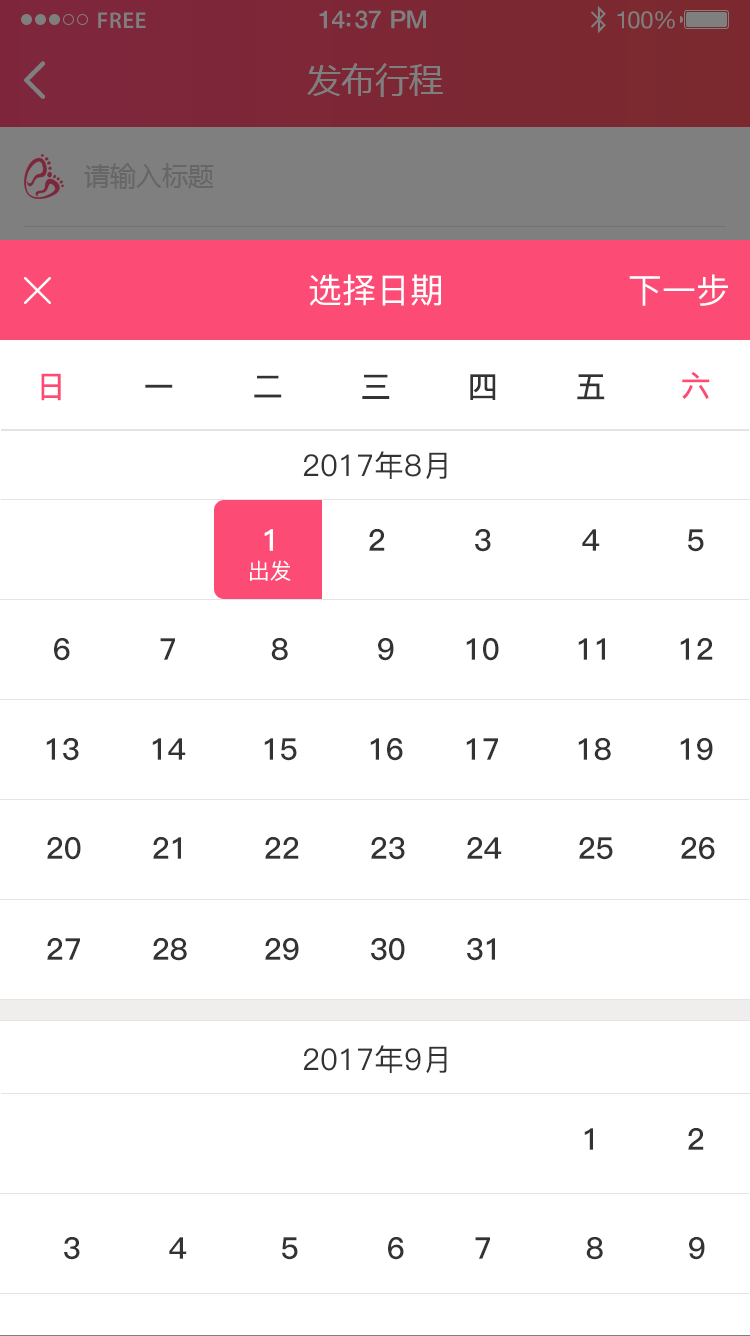
<style>
.page{position:relative;width:750px;height:1336px;background:#ffffff}
.page>*{position:absolute;margin:0}
.t1{font:34px "PingFang-SC-Medium";color:#ffffff;text-transform:uppercase}
.t2{font:30px "PingFang-SC-Bold";color:#fc4c75;text-transform:uppercase}
.t3{font:30px "PingFang-SC-Bold";color:#333333;text-transform:uppercase}
.t4{font:30px "PingFang-SC-Medium";color:#333333;text-transform:uppercase}
.t5{font:30px "PingFang-SC-Bold";color:#ffffff;text-transform:uppercase}
.t6{font:22px "PingFang-SC-Medium";color:#ffffff;text-transform:uppercase}
</style>
<div class="page">
<p class="t1" style="left:309px;top:274px;width:132px;height:32px">选择日期</p>
<p class="t1" style="left:629px;top:274px;width:99px;height:32px">下一步</p>
<p class="t2" style="left:41px;top:373px;width:20px;height:28px">日</p>
<p class="t3" style="left:254px;top:375px;width:28px;height:23px">二</p>
<p class="t3" style="left:362px;top:374px;width:28px;height:25px">三</p>
<p class="t3" style="left:470px;top:374px;width:26px;height:26px">四</p>
<p class="t3" style="left:577px;top:374px;width:28px;height:26px">五</p>
<p class="t2" style="left:682px;top:372px;width:28px;height:27px">六</p>
<p class="t3" style="left:145px;top:384px;width:28px;height:4px">一</p>
<p class="t4" style="left:303px;top:451px;width:144px;height:28px">2017年8月</p>
<p class="t5" style="left:264px;top:529px;width:9px;height:22px">1</p>
<p class="t3" style="left:369px;top:529px;width:16px;height:22px">2</p>
<p class="t3" style="left:475px;top:529px;width:16px;height:23px">3</p>
<p class="t3" style="left:582px;top:529px;width:18px;height:22px">4</p>
<p class="t3" style="left:688px;top:529px;width:16px;height:23px">5</p>
<p class="t6" style="left:250px;top:560px;width:41px;height:21px">出发</p>
<p class="t3" style="left:54px;top:638px;width:16px;height:23px">6</p>
<p class="t3" style="left:160px;top:638px;width:15px;height:22px">7</p>
<p class="t3" style="left:271px;top:638px;width:17px;height:23px">8</p>
<p class="t3" style="left:378px;top:638px;width:16px;height:23px">9</p>
<p class="t3" style="left:466px;top:638px;width:33px;height:23px">10</p>
<p class="t3" style="left:578px;top:638px;width:27px;height:22px">11</p>
<p class="t3" style="left:680px;top:638px;width:33px;height:22px">12</p>
<p class="t3" style="left:46px;top:738px;width:33px;height:23px">13</p>
<p class="t3" style="left:152px;top:738px;width:34px;height:22px">14</p>
<p class="t3" style="left:264px;top:738px;width:33px;height:23px">15</p>
<p class="t3" style="left:370px;top:738px;width:33px;height:23px">16</p>
<p class="t3" style="left:466px;top:738px;width:32px;height:22px">17</p>
<p class="t3" style="left:578px;top:738px;width:33px;height:23px">18</p>
<p class="t3" style="left:680px;top:738px;width:33px;height:23px">19</p>
<p class="t3" style="left:47px;top:837px;width:34px;height:23px">20</p>
<p class="t3" style="left:153px;top:837px;width:28px;height:22px">21</p>
<p class="t3" style="left:265px;top:837px;width:34px;height:22px">22</p>
<p class="t3" style="left:371px;top:837px;width:34px;height:23px">23</p>
<p class="t3" style="left:467px;top:837px;width:35px;height:22px">24</p>
<p class="t3" style="left:579px;top:837px;width:34px;height:23px">25</p>
<p class="t3" style="left:681px;top:837px;width:34px;height:23px">26</p>
<p class="t3" style="left:47px;top:938px;width:33px;height:22px">27</p>
<p class="t3" style="left:153px;top:938px;width:34px;height:23px">28</p>
<p class="t3" style="left:265px;top:938px;width:34px;height:23px">29</p>
<p class="t3" style="left:371px;top:938px;width:34px;height:23px">30</p>
<p class="t3" style="left:467px;top:938px;width:28px;height:23px">31</p>
<p class="t4" style="left:303px;top:1045px;width:144px;height:28px">2017年9月</p>
<p class="t3" style="left:584px;top:1128px;width:9px;height:22px">1</p>
<p class="t3" style="left:688px;top:1128px;width:16px;height:22px">2</p>
<p class="t3" style="left:64px;top:1237px;width:16px;height:23px">3</p>
<p class="t3" style="left:169px;top:1237px;width:18px;height:22px">4</p>
<p class="t3" style="left:282px;top:1237px;width:16px;height:23px">5</p>
<p class="t3" style="left:388px;top:1237px;width:16px;height:23px">6</p>
<p class="t3" style="left:475px;top:1237px;width:15px;height:22px">7</p>
<p class="t3" style="left:586px;top:1237px;width:17px;height:23px">8</p>
<p class="t3" style="left:689px;top:1237px;width:16px;height:23px">9</p>
</div>
